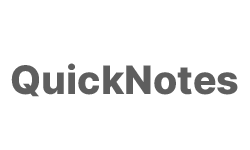
<style>
.page{position:relative;width:250px;height:150px;background:#ffffff}
.page>*{position:absolute;margin:0}
.t1{font:39.3px "Inter-ExtraBold";color:#5e5e5e}
</style>
<div class="page">
<p class="t1" style="left:11px;top:63px;width:227px;height:34px">QuickNotes</p>
</div>
